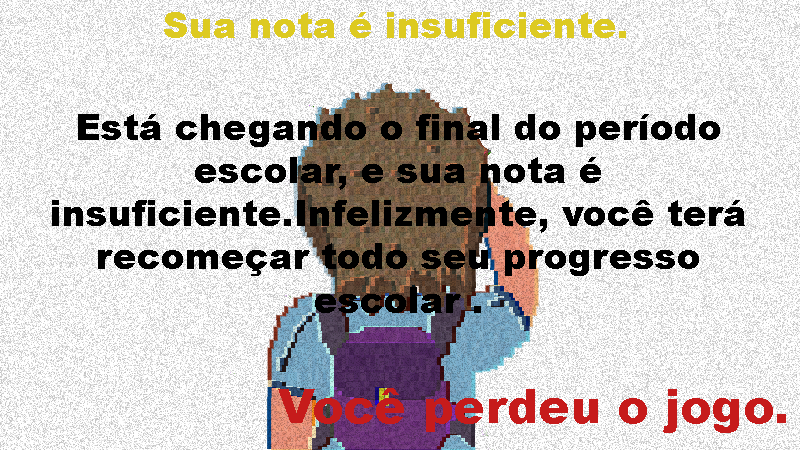
<style>
.page{position:relative;width:800px;height:450px;background:#ffffff}
.page>*{position:absolute;margin:0}
.t1{font:36px "Arial-Black";color:#ddca21}
.t2{font:36px "Arial-Black";color:#000000}
.t3{font:47.2px "Arial-Black";color:#c61b1b}
</style>
<div class="page">
<p class="t1" style="left:164px;top:12px;width:462px;height:26px">Sua nota é insuficiente.</p>
<p class="t2" style="left:52px;top:114px;width:693px;height:199px;text-align:center">Está chegando o final do período escolar, e sua nota é insuficiente.Infelizmente, você terá recomeçar todo seu progresso escolar .</p>
<p class="t3" style="left:278px;top:388px;width:508px;height:45px">Você perdeu o jogo.</p>
</div>
